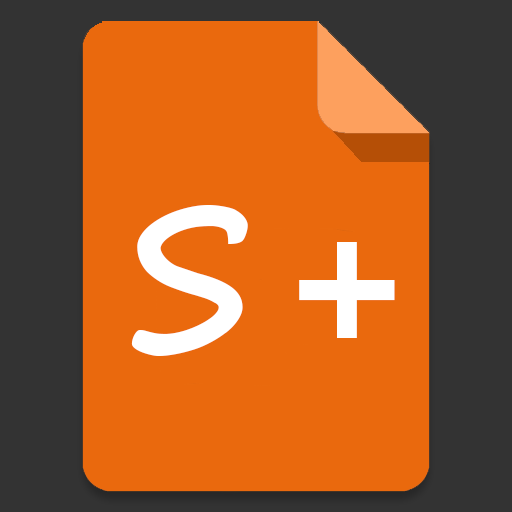
<style>
.page{position:relative;width:512px;height:512px;background:#ea690d}
.page>*{position:absolute;margin:0}
.t1{font:200px "SegoeScript-Bold";letter-spacing:0.12em;color:#ffffff}
.t2{font:200px "MicrosoftTaiLe-Bold";letter-spacing:0.12em;color:#ffffff}
</style>
<div class="page">
<p class="t1" style="left:131px;top:205px;width:264px;height:151px">S<span class="t2">+</span></p>
</div>
